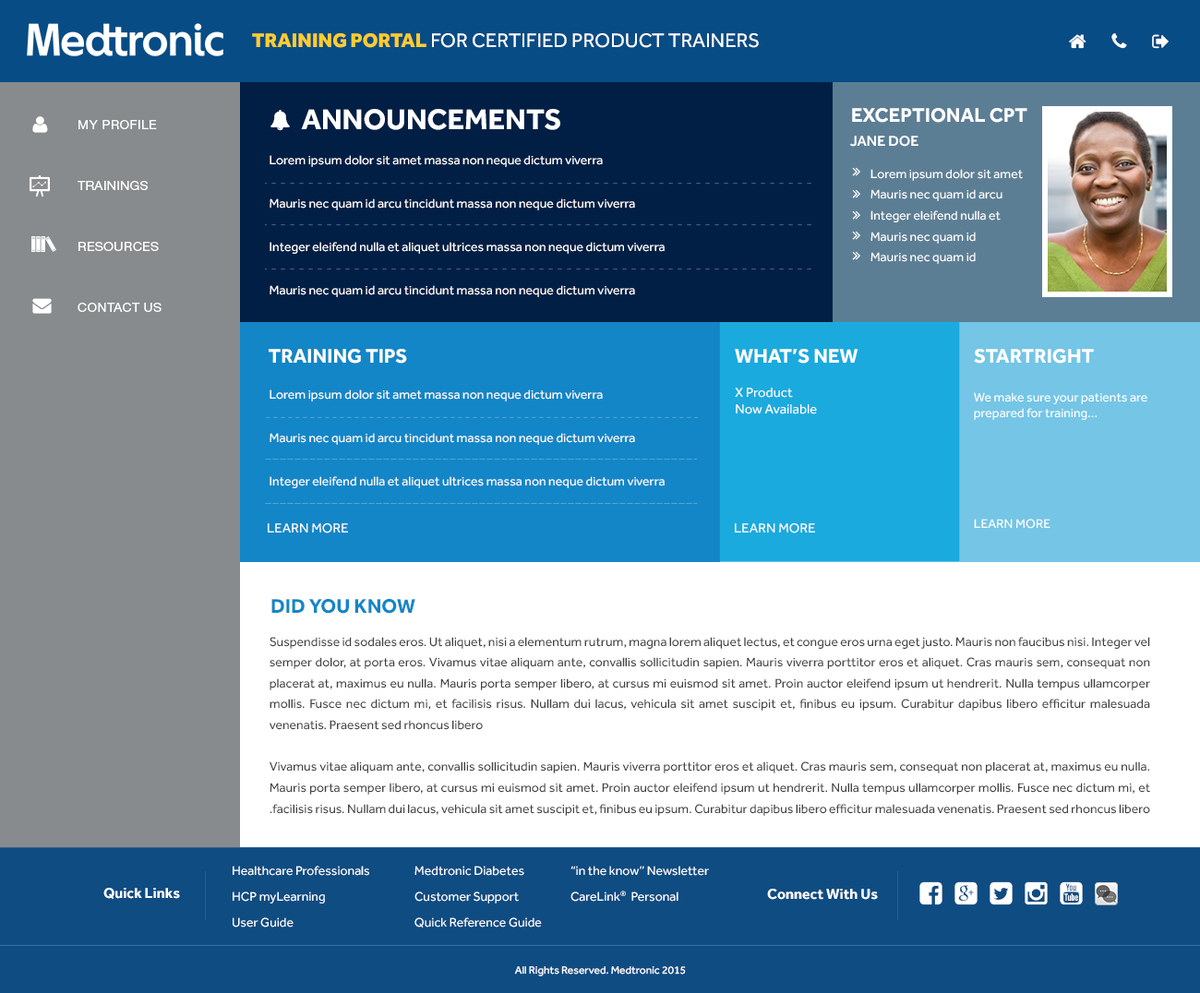
<style>
.page{position:relative;width:1200px;height:993px}
.page>*{position:absolute;margin:0}
.t1{font:20.3px "Effra-Regular";color:#ffffff;text-transform:uppercase}
.t2{font:20.3px "Effra-Heavy";color:#fecd2e;text-transform:uppercase}
.t3{font:29.5px "Effra-Bold";color:#ffffff;text-transform:uppercase}
.t4{font:20.3px "Effra-Bold";color:#ffffff;text-transform:uppercase}
.t5{font:12.9px/60.9px "HelveticaNeueLTStd-Roman";letter-spacing:0.025em;color:#ffffff;text-transform:uppercase}
.t6{font:14.8px "Effra-Medium";color:#ffffff;text-transform:uppercase}
.t7{font:12.9px/43.5px "Effra-Regular";color:#ffffff}
.t8{font:12.9px/20.9px "Effra-Regular";color:#ffffff}
.t9{font:13.7px "Effra-Regular";color:#ffffff}
.t10{font:12.9px "Effra-Regular";color:#ffffff}
.t11{font:12.9px "Effra-Regular";color:#ffffff;text-transform:uppercase}
.t12{font:13.7px "Effra-Regular";color:#ffffff;text-transform:uppercase}
.t13{font:20.3px "Effra-Bold";color:#1386c7;text-transform:uppercase}
.t14{font:12.9px/20.9px "Effra-Regular";color:#424242}
.t15{font:12.9px/25.9px "Effra-Regular";color:#ffffff}
.t16{font:14.8px "Effra-Bold";color:#ffffff}
.t17{font:10.8px "Effra-Regular";color:#ffffff}
</style>
<div class="page">
<p class="t1" style="left:252px;top:33px;width:507px;height:15px"><span class="t2">Training Portal</span> for certified product trainers</p>
<p class="t3" style="left:301px;top:109px;width:259px;height:21px">Announcements</p>
<p class="t4" style="left:852px;top:108px;width:176px;height:15px">Exceptional CPT</p>
<p class="t5" style="left:78px;top:120px;width:84px;height:192px">My Profile<br>Trainings<br>resources<br>contact us</p>
<p class="t6" style="left:850px;top:136px;width:69px;height:11px">Jane Doe</p>
<p class="t7" style="left:270px;top:155px;width:395px;height:142px;text-align:right">Lorem ipsum dolor sit amet massa non neque dictum viverra<br>Mauris nec quam id arcu tincidunt massa non neque dictum viverra  <br>Integer eleifend nulla et aliquet ultrices massa non neque dictum viverra<br>Mauris nec quam id arcu tincidunt massa non neque dictum viverra</p>
<p class="t8" style="left:871px;top:169px;width:152px;height:95px;text-align:right">Lorem ipsum dolor sit amet  <br>Mauris nec quam id arcu <br>Integer eleifend nulla et <br>Mauris nec quam id<br>Mauris nec quam id</p>
<p class="t4" style="left:269px;top:349px;width:138px;height:15px">Training Tips</p>
<p class="t4" style="left:735px;top:349px;width:124px;height:15px">What’s new</p>
<p class="t4" style="left:974px;top:349px;width:120px;height:15px">Startright</p>
<p class="t7" style="left:270px;top:390px;width:395px;height:98px;text-align:right">Lorem ipsum dolor sit amet massa non neque dictum viverra<br>Mauris nec quam id arcu tincidunt massa non neque dictum viverra  <br>Integer eleifend nulla et aliquet ultrices massa non neque dictum viverra</p>
<p class="t9" style="left:735px;top:388px;width:82px;height:27px">X Product<br>Now Available</p>
<p class="t10" style="left:974px;top:392px;width:174px;height:28px">We make sure your patients are prepared for training...</p>
<p class="t11" style="left:974px;top:519px;width:77px;height:10px">learn more</p>
<p class="t12" style="left:268px;top:524px;width:80px;height:10px">learn more</p>
<p class="t12" style="left:735px;top:524px;width:80px;height:10px">learn more</p>
<p class="t13" style="left:271px;top:599px;width:144px;height:15px">did you know</p>
<p class="t14" style="left:270px;top:637px;width:880px;height:179px;text-align:justify">Suspendisse id sodales eros. Ut aliquet, nisi a elementum rutrum, magna lorem aliquet lectus, et congue eros urna eget justo. Mauris non faucibus nisi. Integer vel semper dolor, at porta eros. Vivamus vitae aliquam ante, convallis sollicitudin sapien. Mauris viverra porttitor eros et aliquet. Cras mauris sem, consequat non placerat at, maximus eu nulla. Mauris porta semper libero, at cursus mi euismod sit amet. Proin auctor eleifend ipsum ut hendrerit. Nulla tempus ullamcorper mollis. Fusce nec dictum mi, et facilisis risus. Nullam dui lacus, vehicula sit amet suscipit et, finibus eu ipsum. Curabitur dapibus libero efficitur malesuada venenatis. Praesent sed rhoncus libero<br><br>Vivamus vitae aliquam ante, convallis sollicitudin sapien. Mauris viverra porttitor eros et aliquet. Cras mauris sem, consequat non placerat at, maximus eu nulla. Mauris porta semper libero, at cursus mi euismod sit amet. Proin auctor eleifend ipsum ut hendrerit. Nulla tempus ullamcorper mollis. Fusce nec dictum mi, et facilisis risus. Nullam dui lacus, vehicula sit amet suscipit et, finibus eu ipsum. Curabitur dapibus libero efficitur malesuada venenatis. Praesent sed rhoncus libero.</p>
<p class="t15" style="left:233px;top:866px;width:136px;height:62px">Healthcare Professionals<br>HCP myLearning<br>User Guide</p>
<p class="t15" style="left:415px;top:866px;width:127px;height:63px;text-align:right">Medtronic Diabetes<br>Customer Support<br>Quick Reference Guide</p>
<p class="t15" style="left:571px;top:866px;width:138px;height:36px">“in the know” Newsletter<br>CareLink®  Personal</p>
<p class="t16" style="left:103px;top:888px;width:77px;height:12px">Quick Links</p>
<p class="t16" style="left:767px;top:889px;width:111px;height:11px">Connect With Us</p>
<p class="t17" style="left:514px;top:967px;width:172px;height:10px">2015 All Rights Reserved. Medtronic</p>
</div>
